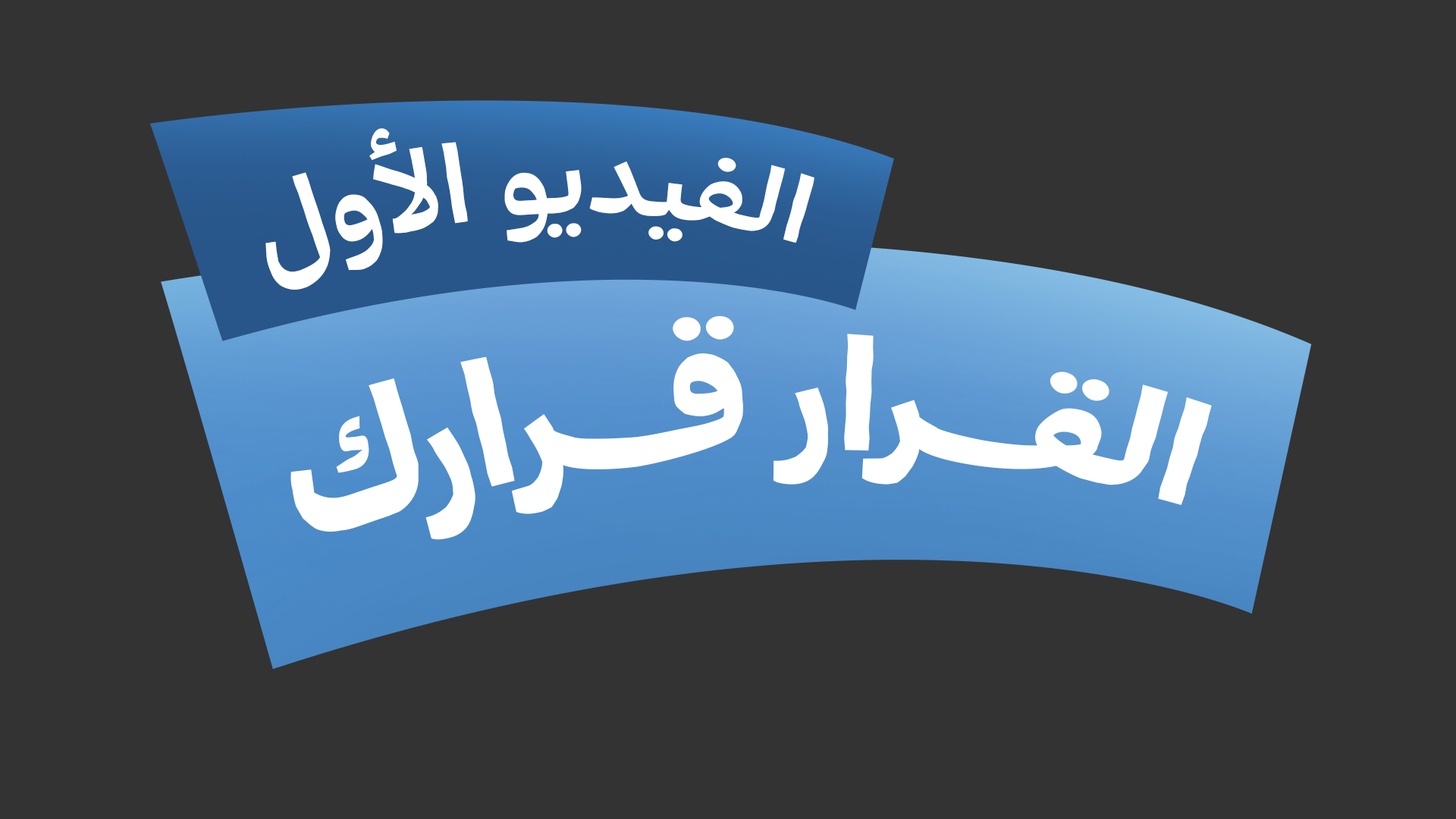
<style>
.page{position:relative;width:1456px;height:819px;background:#333333}
.page>*{position:absolute;margin:0}
.t1{font:109.3px "TheYearofHandicrafts-SemiBold";color:#ffffff}
.t2{font:168.1px "TheYearofHandicrafts-Black";color:#ffffff}
</style>
<div class="page">
<p class="t1" style="left:265px;top:128px;width:549px;height:162px;rotate:-3deg">الفيديو الأول</p>
<p class="t2" style="left:290px;top:315px;width:922px;height:225px;rotate:-2deg">القـــرار قــــرارك</p>
</div>
